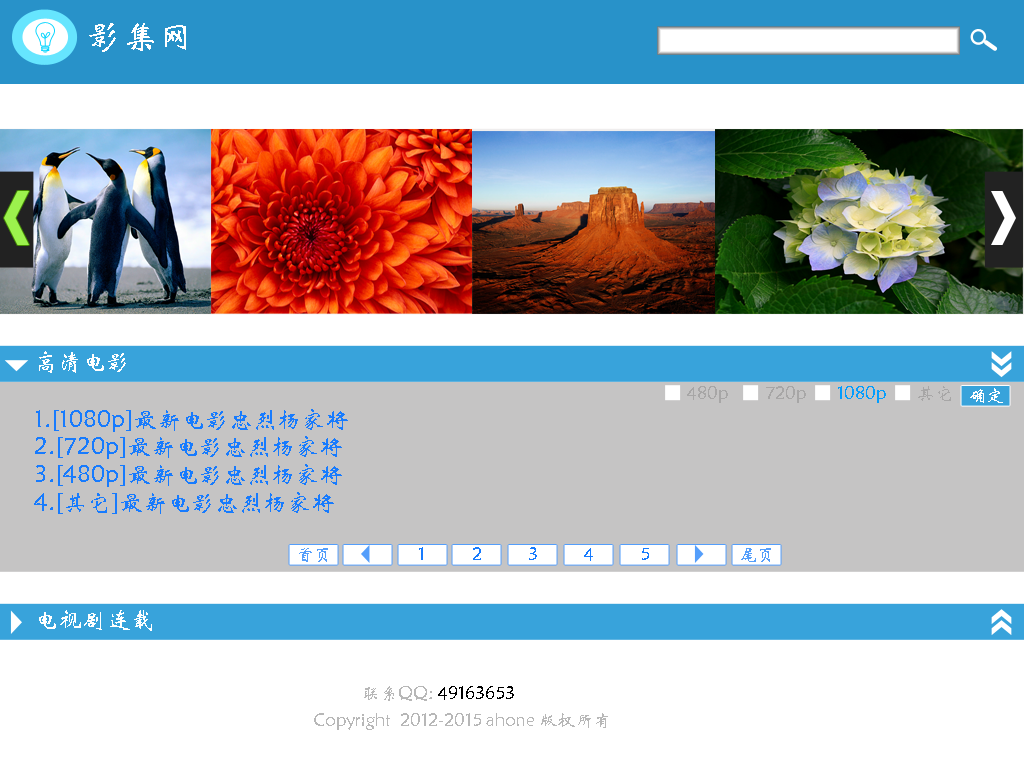
<style>
.page{position:relative;width:1024px;height:768px;background:#ffffff}
.page>*{position:absolute;margin:0}
.t1{font:36px "STXinwei";color:#ffffff}
.t2{font:24px "STXinwei";color:#ffffff}
.t3{font:18px "STXinwei";color:#a7a6a6}
.t4{font:18px "STXinwei";color:#039dfe}
.t5{font:18px "STXinwei";color:#ffffff}
.t6{font:24px "STXinwei";color:#177bfe}
.t7{font:18px "STXinwei";color:#549efb}
.t8{font:18px "STXinwei";color:#177bfe}
.t9{font:18px "STXinwei";color:#000000}
.t10{font:18px "STXinwei";color:#b7b7b7}
</style>
<div class="page">
<p class="t1" style="left:89px;top:23px;width:97px;height:29px">影集网</p>
<p class="t2" style="left:39px;top:351px;width:87px;height:22px">高清电影</p>
<p class="t3" style="left:687px;top:386px;width:41px;height:17px">480p</p>
<p class="t3" style="left:766px;top:386px;width:40px;height:17px">720p</p>
<p class="t4" style="left:838px;top:386px;width:48px;height:17px">1080p</p>
<p class="t3" style="left:918px;top:386px;width:33px;height:15px">其它</p>
<p class="t5" style="left:970px;top:388px;width:33px;height:15px">确定</p>
<p class="t6" style="left:36px;top:409px;width:312px;height:23px">1.[1080p]最新电影忠烈杨家将</p>
<p class="t6" style="left:35px;top:436px;width:307px;height:23px">2.[720p]最新电影忠烈杨家将</p>
<p class="t6" style="left:36px;top:464px;width:306px;height:23px">3.[480p]最新电影忠烈杨家将</p>
<p class="t6" style="left:34px;top:492px;width:300px;height:22px">4.[其它]最新电影忠烈杨家将</p>
<p class="t7" style="left:299px;top:548px;width:29px;height:14px">首页</p>
<p class="t8" style="left:419px;top:547px;width:4px;height:13px">1</p>
<p class="t8" style="left:473px;top:547px;width:8px;height:13px">2</p>
<p class="t8" style="left:529px;top:547px;width:8px;height:13px">3</p>
<p class="t8" style="left:584px;top:548px;width:9px;height:13px">4</p>
<p class="t8" style="left:642px;top:548px;width:7px;height:12px">5</p>
<p class="t7" style="left:741px;top:548px;width:30px;height:14px">尾页</p>
<p class="t2" style="left:39px;top:610px;width:113px;height:21px">电视剧连载</p>
<p class="t9" style="left:364px;top:686px;width:150px;height:15px"><span class="t10">联系QQ: </span>49163653</p>
<p class="t10" style="left:314px;top:713px;width:294px;height:17px">Copyright©2012-2015 ahone 版权所有</p>
</div>
